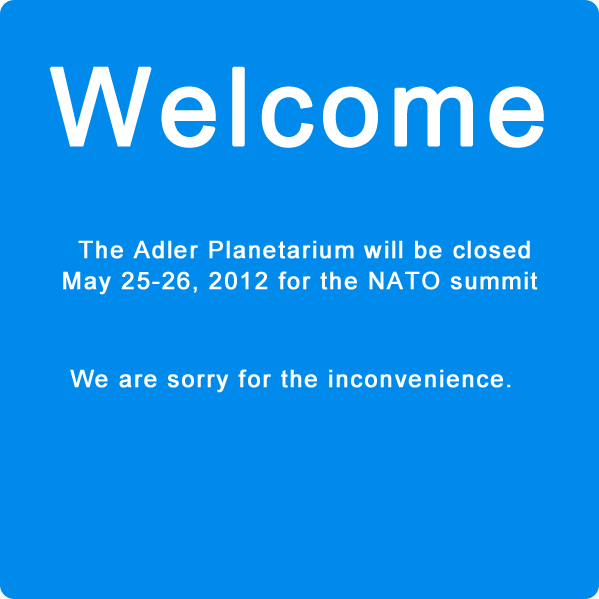
<style>
.page{position:relative;width:599px;height:599px;background:#008bec}
.page>*{position:absolute;margin:0}
.t1{font:107.2px "ArialMT";letter-spacing:0.05em;color:#ffffff;font-weight:bold}
.t2{font:24px "ArialMT";letter-spacing:0.05em;color:#ffffff;font-weight:bold}
</style>
<div class="page">
<p class="t1" style="left:49px;top:66px;width:495px;height:82px">Welcome</p>
<p class="t2" style="left:78px;top:240px;width:452px;height:19px">The Adler Planetarium will be closed</p>
<p class="t2" style="left:63px;top:271px;width:475px;height:24px">May 25-26, 2012 for the NATO summit</p>
<p class="t2" style="left:70px;top:369px;width:441px;height:24px">We are sorry for the inconvenience.</p>
</div>
